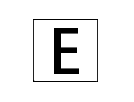
<style>
.page{position:relative;width:134px;height:102px;background:#ffffff}
.page>*{position:absolute;margin:0}
.t1{font:60px "AdobeHeitiStd-Regular";color:#000000}
</style>
<div class="page">
<p class="t1" style="left:54px;top:28px;width:25px;height:46px">E</p>
</div>
